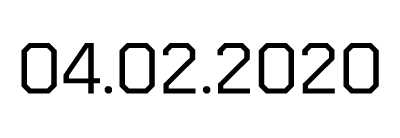
<style>
.page{position:relative;width:400px;height:138px;background:#ffffff}
.page>*{position:absolute;margin:0}
.t1{font:72px "ChakraPetch-Regular";color:#000000}
</style>
<div class="page">
<p class="t1" style="left:21px;top:43px;width:358px;height:51px">04.02.2020</p>
</div>
